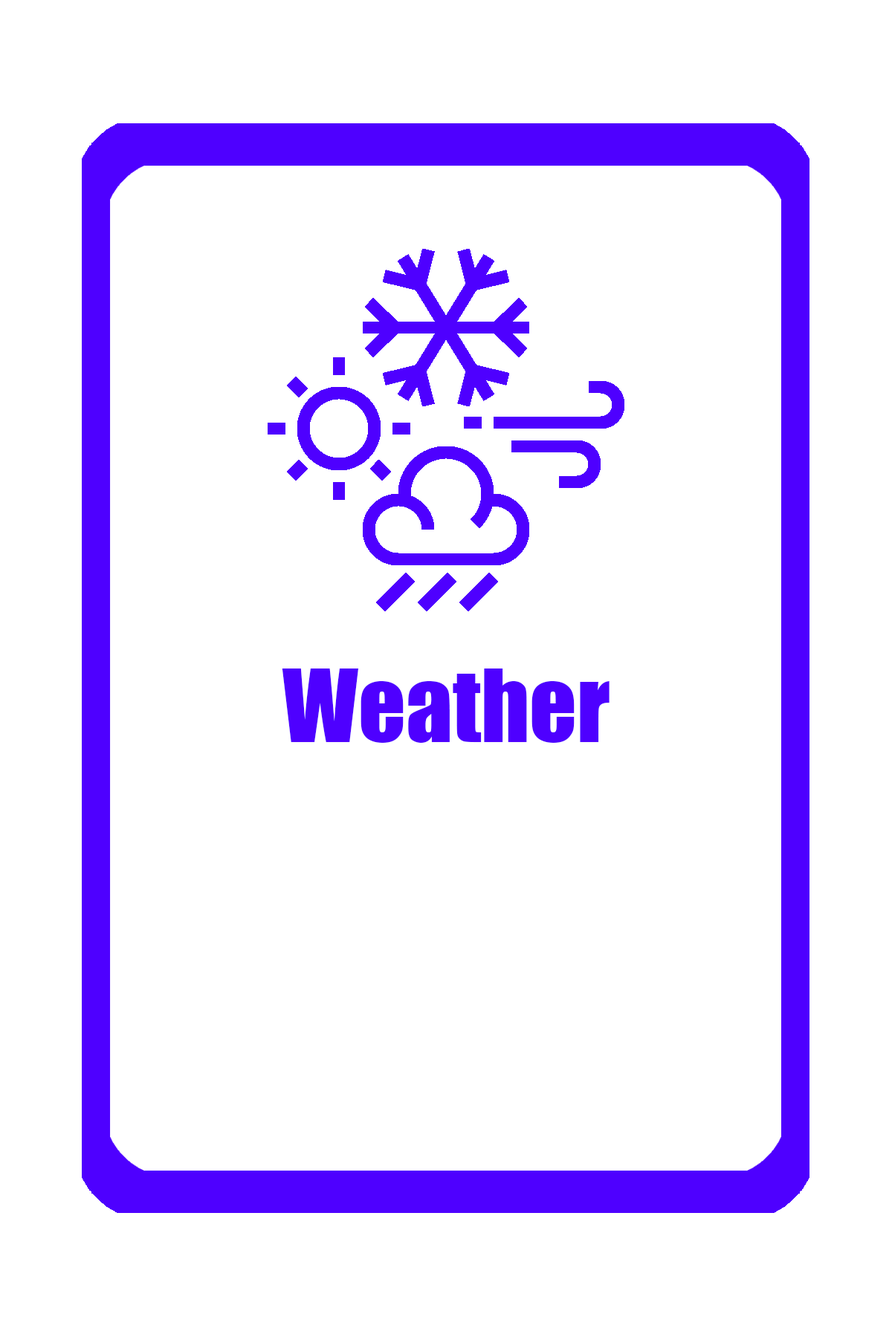
<style>
.page{position:relative;width:892px;height:1337px;background:#ffffff}
.page>*{position:absolute;margin:0}
.t1{font:92.9px "Impact";color:#4e00ff}
</style>
<div class="page">
<p class="t1" style="left:282px;top:669px;width:327px;height:74px">Weather</p>
</div>
